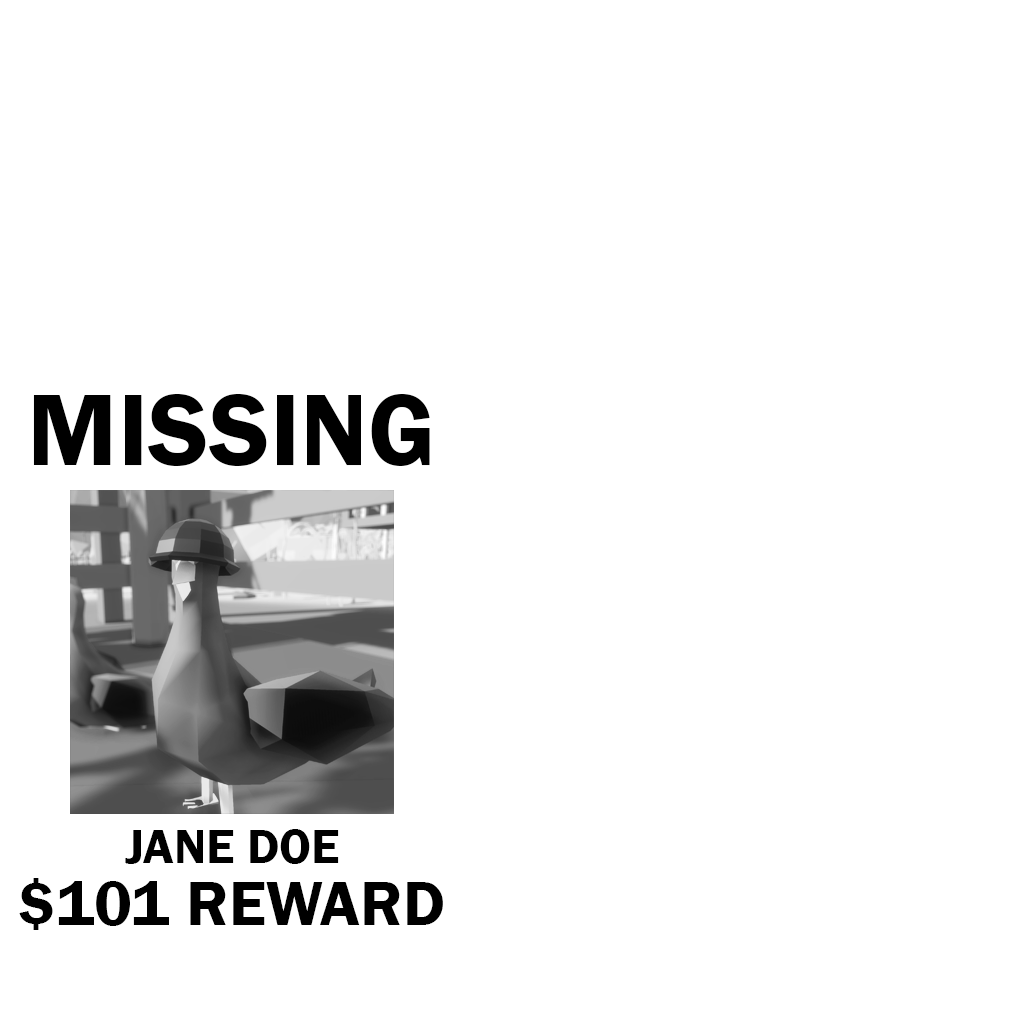
<style>
.page{position:relative;width:1024px;height:1024px;background:#ffffff}
.page>*{position:absolute;margin:0}
.t1{font:105px "FranklinGothic-Demi";color:#000000}
.t2{font:50px "FranklinGothic-Demi";color:#000000}
.t3{font:65px "FranklinGothic-Demi";color:#000000}
</style>
<div class="page">
<p class="t1" style="left:33px;top:394px;width:397px;height:72px">MISSING</p>
<p class="t2" style="left:125px;top:829px;width:214px;height:35px">JANE DOE</p>
<p class="t3" style="left:19px;top:878px;width:424px;height:52px">$101 REWARD</p>
</div>
